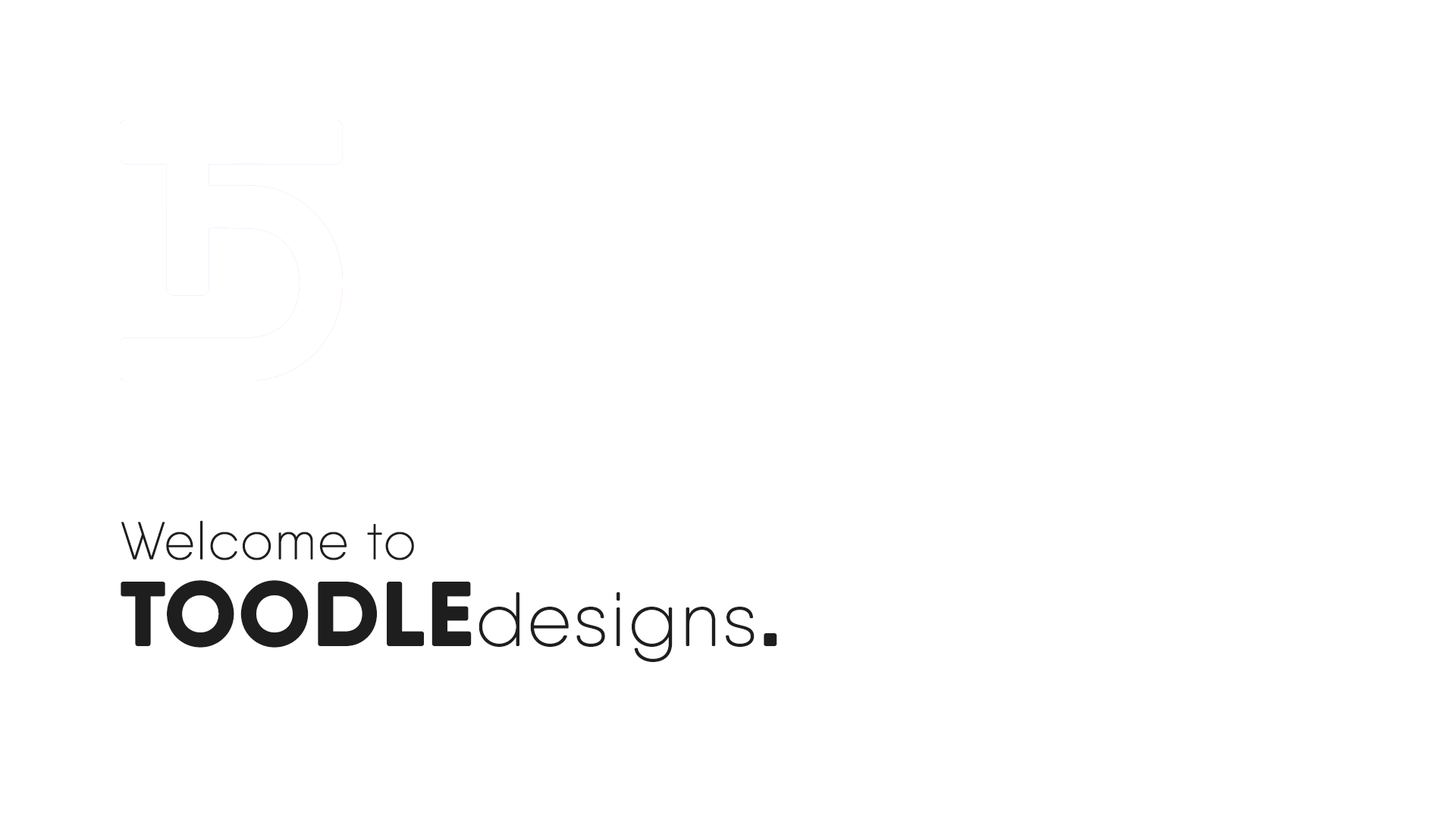
<style>
.page{position:relative;width:1456px;height:819px;background:#ffffff}
.page>*{position:absolute;margin:0}
.t1{font:53.1px "QanelasSoftDEMO-UltraLight";color:#1e1e1e;font-weight:bold}
.t2{font:91px "QanelasSoftDEMO-ExtraBold";color:#1e1e1e;font-weight:bold}
.t3{font:75.8px "QanelasSoftDEMO-UltraLight";color:#1e1e1e;font-weight:bold}
.t4{font:75.8px "QanelasSoftDEMO-ExtraBold";color:#1e1e1e;font-weight:bold}
</style>
<div class="page">
<p class="t1" style="left:121px;top:520px;width:656px;height:142px">Welcome to<br><span class="t2">TOODLE</span><span class="t3">designs</span><span class="t4">.</span></p>
</div>
